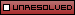
<style>
.page{position:relative;width:75px;height:15px;background:#000000}
.page>*{position:absolute;margin:0}
.t1{font:8px "BitDustTwo";color:#000000}
</style>
<div class="page">
<p class="t1" style="left:13px;top:5px;width:59px;height:5px">UNRESOLVED</p>
</div>
